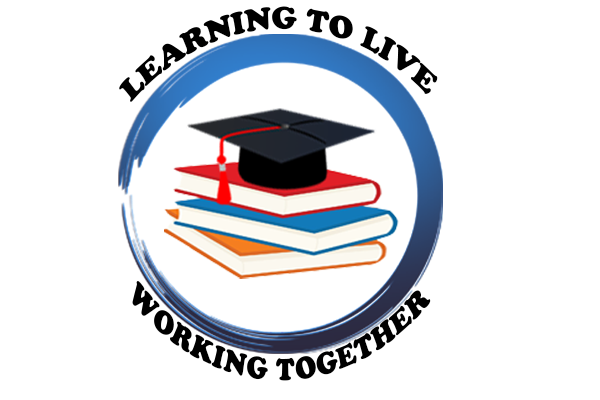
<style>
.page{position:relative;width:600px;height:400px;background:#ffffff}
.page>*{position:absolute;margin:0}
.t1{font:29.8px "CooperBlackStd";color:#000000;scale:0.84 1}
.t2{font:29.8px "CooperBlackStd";color:#000000;scale:0.75 1}
</style>
<div class="page">
<p class="t1" style="left:119px;top:6px;width:319px;height:96px">LEARNING TO LIVE</p>
<p class="t1" style="left:120px;top:8px;width:319px;height:96px">LEARNING TO LIVE</p>
<p class="t2" style="left:132px;top:281px;width:299px;height:100px">WORKING TOGETHER</p>
<p class="t2" style="left:133px;top:282px;width:299px;height:100px">WORKING TOGETHER</p>
</div>
